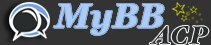
<style>
.page{position:relative;width:211px;height:45px;background:#333333}
.page>*{position:absolute;margin:0}
.t1{font:33.8px "Georgia-BoldItalic";color:#acccf6}
</style>
<div class="page">
<p class="t1" style="left:53px;top:4px;width:111px;height:31px">MyBB</p>
<p class="t1" style="left:53px;top:4px;width:111px;height:31px">MyBB</p>
</div>
